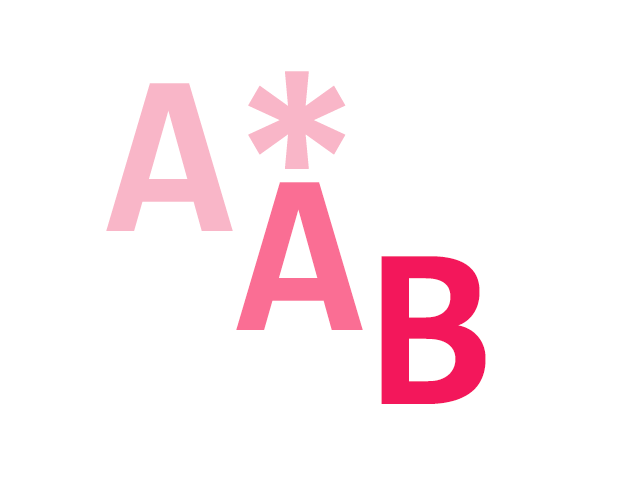
<style>
.page{position:relative;width:620px;height:500px;background:#ffffff}
.page>*{position:absolute;margin:0}
.t1{font:55.6px "Consolas-Bold";color:#f9b6c8}
.t2{font:55.6px "Consolas-Bold";color:#fa6e94}
.t3{font:55.6px "Consolas-Bold";color:#f3175b}
</style>
<div class="page">
<p class="t1" style="left:106px;top:71px;width:240px;height:160px">A*</p>
<p class="t2" style="left:236px;top:182px;width:127px;height:148px">A</p>
<p class="t3" style="left:381px;top:256px;width:105px;height:148px">B</p>
</div>
